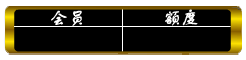
<style>
.page{position:relative;width:246px;height:60px;background:#000000}
.page>*{position:absolute;margin:0}
.t1{font:18px "FZSTK--GBK1-0";color:#ffffff;font-weight:bold}
</style>
<div class="page">
<p class="t1" style="left:51px;top:10px;width:31px;height:16px">会员</p>
<p class="t1" style="left:165px;top:9px;width:33px;height:17px">额度</p>
</div>
